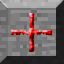
<style>
.page{position:relative;width:64px;height:64px}
.page>*{position:absolute;margin:0}
.t1{font:100px "Papyrus-Regular"}
</style>
<div class="page">
<p class="t1" style="left:10px;top:13px;width:43px;height:39px">+</p>
</div>
